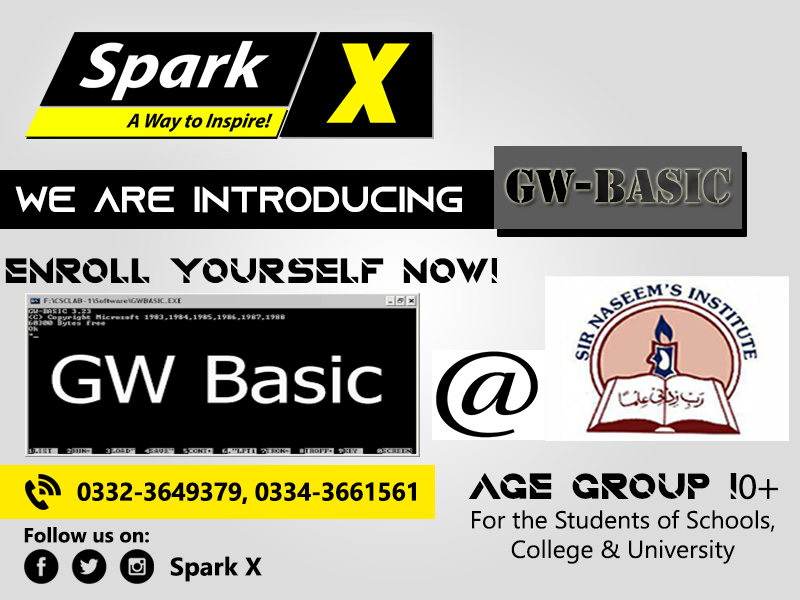
<style>
.page{position:relative;width:800px;height:600px;background:#dcdcdc}
.page>*{position:absolute;margin:0}
.t1{font:43px "StencilStd"}
.t2{font:36px "AzonixRegular";color:#ffffff}
.t3{font:36px "QuantumRegular";color:#000000}
.t4{font:36.8px "QuantumRegular";color:#000000}
.t5{font:36.8px "MyriadPro-Regular";color:#000000}
.t6{font:25.5px "SegoeUI-Bold";letter-spacing:-0.02em;color:#000000}
.t7{font:24.5px "SegoeUI";color:#000000}
.t8{font:20.4px "SegoeUI-Bold";color:#000000}
.t9{font:25.5px "SegoeUI-Bold";color:#000000}
</style>
<div class="page">
<p class="t1" style="left:506px;top:169px;width:223px;height:34px">GW-BASIC</p>
<p class="t2" style="left:15px;top:186px;width:447px;height:27px">WE ARE INTRODUCING</p>
<p class="t3" style="left:5px;top:257px;width:492px;height:26px">ENROLL YOURSELF NOW!</p>
<p class="t4" style="left:468px;top:473px;width:310px;height:27px">AGE GROUP !<span class="t5">0+</span></p>
<p class="t6" style="left:77px;top:482px;width:339px;height:22px">0332-3649379, 0334-3661561</p>
<p class="t7" style="left:472px;top:509px;width:303px;height:55px;text-align:center">For the Students of Schools,<br>College &amp; University</p>
<p class="t8" style="left:24px;top:527px;width:125px;height:16px">Follow us on:</p>
<p class="t9" style="left:170px;top:556px;width:92px;height:26px">Spark X</p>
</div>
